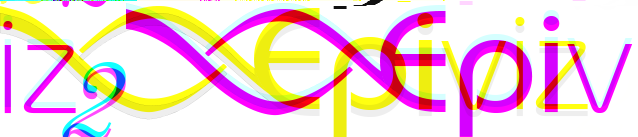
<style>
.page{position:relative;width:638px;height:137px;background:#ffffff}
.page>*{position:absolute;margin:0}
.t1{font:143.8px "BauhausITCbyBT-Medium";scale:1.05 1}
.t2{font:143.8px "BauhausITCbyBT-Light";scale:1.05 1}
</style>
<div class="page">
<p class="t1" style="left:254px;top:5px;width:334px;height:131px">Epi<span class="t2">viz</span></p>
</div>
